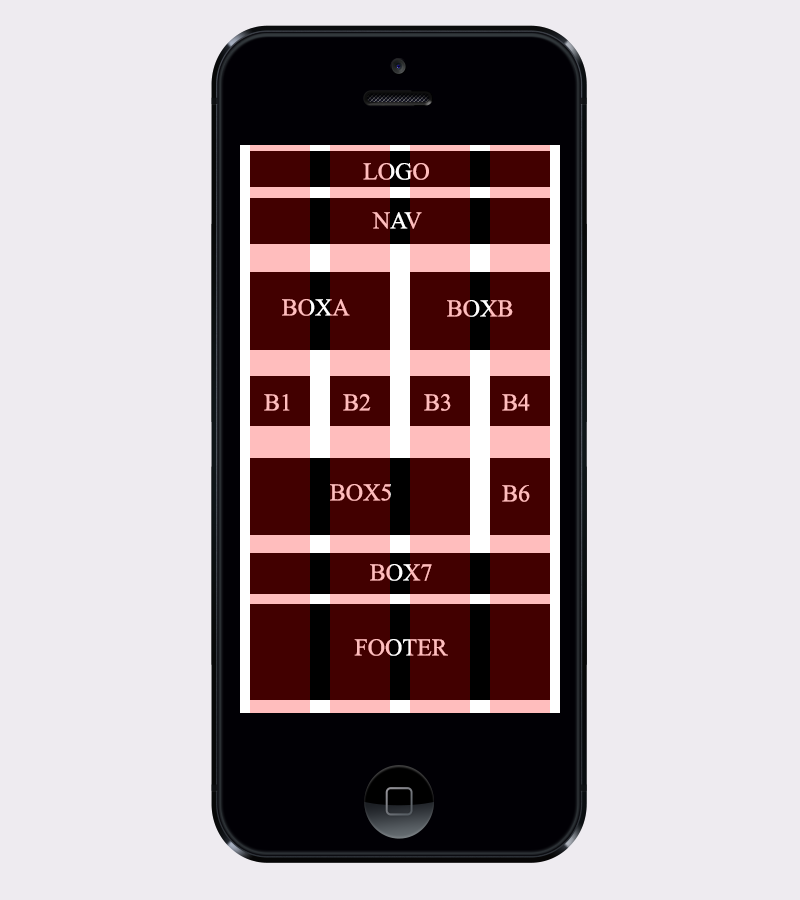
<style>
.page{position:relative;width:800px;height:900px;background:#eeebf0}
.page>*{position:absolute;margin:0}
.t1{font:24px "TimesNewRomanPSMT"}
.t2{font:24px "TimesNewRomanPSMT";color:#ffbdbd}
</style>
<div class="page">
<p class="t1" style="left:363px;top:163px;width:66px;height:17px">LOGO</p>
<p class="t1" style="left:372px;top:212px;width:50px;height:17px">NAV</p>
<p class="t1" style="left:282px;top:299px;width:68px;height:17px">BOXA</p>
<p class="t2" style="left:447px;top:300px;width:66px;height:17px">BOXB</p>
<p class="t2" style="left:264px;top:394px;width:26px;height:17px">B1</p>
<p class="t2" style="left:343px;top:394px;width:28px;height:17px">B2</p>
<p class="t2" style="left:424px;top:394px;width:27px;height:17px">B3</p>
<p class="t2" style="left:502px;top:394px;width:28px;height:17px">B4</p>
<p class="t2" style="left:330px;top:484px;width:61px;height:17px">BOX5</p>
<p class="t2" style="left:502px;top:485px;width:28px;height:17px">B6</p>
<p class="t2" style="left:370px;top:564px;width:62px;height:17px">BOX7</p>
<p class="t2" style="left:354px;top:639px;width:94px;height:17px">FOOTER</p>
</div>
